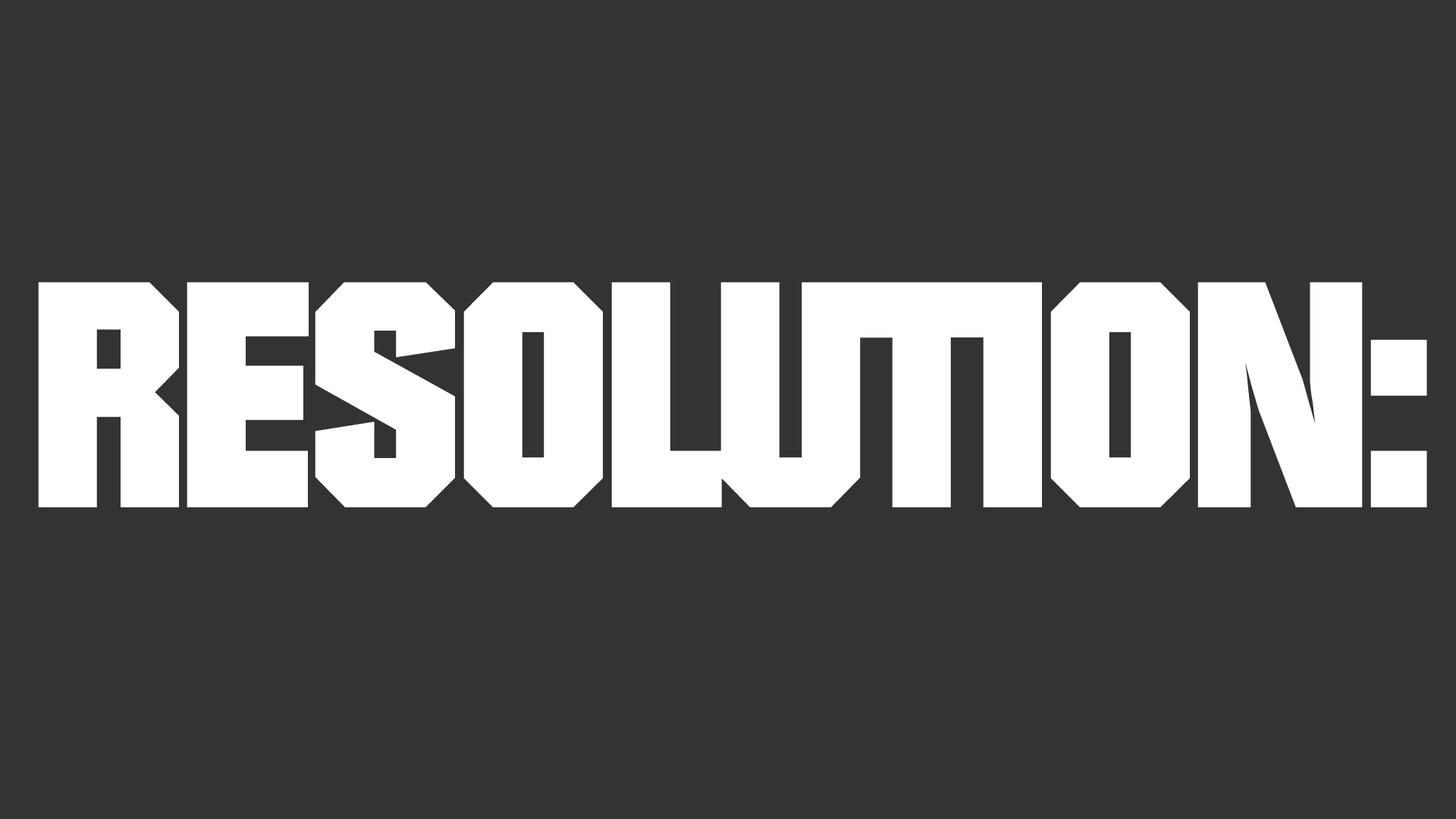
<style>
.page{position:relative;width:1456px;height:819px;background:#333333}
.page>*{position:absolute;margin:0}
.t1{font:312.1px "Diamante-Serial-Heavy-Regular";letter-spacing:-0.03em;color:#ffffff;text-transform:uppercase}
</style>
<div class="page">
<p class="t1" style="left:38px;top:282px;width:1389px;height:225px">resolution:</p>
</div>
